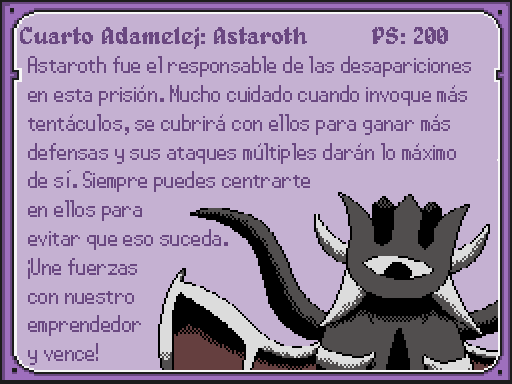
<style>
.page{position:relative;width:512px;height:384px;background:#c5b1d2}
.page>*{position:absolute;margin:0}
.t1{font:24px "Alagard";color:#6a4881}
.t2{font:24px "PowerClear-Regular";letter-spacing:-0.025em;color:#6a4881}
</style>
<div class="page">
<p class="t1" style="left:20px;top:27px;width:287px;height:22px">Cuarto Adamelej: Astaroth</p>
<p class="t1" style="left:372px;top:27px;width:76px;height:17px">PS: 200</p>
<p class="t2" style="left:28px;top:56px;width:443px;height:309px">Astaroth fue el responsable de las desapariciones<br>en esta prisión. Mucho cuidado cuando invoque más<br>tentáculos, se cubrirá con ellos para ganar más <br>defensas y sus ataques múltiples darán lo máximo<br>de sí. Siempre puedes centrarte<br>en ellos para<br>evitar que eso suceda.<br>¡Une fuerzas<br>con nuestro<br>emprendedor<br>y vence!</p>
</div>
